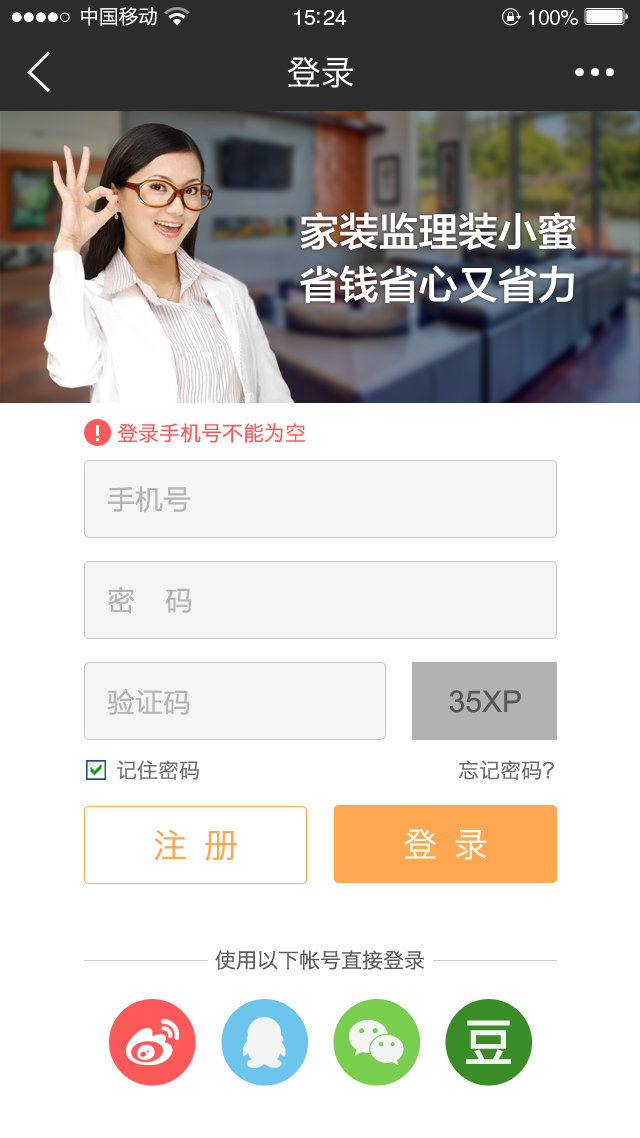
<style>
.page{position:relative;width:640px;height:1138px;background:#ffffff}
.page>*{position:absolute;margin:0}
.t1{font:20px "HiraginoSansGB-W3";letter-spacing:-0.02em;color:#ffffff}
.t2{font:21.5px "HelveticaLTStd-Roman";letter-spacing:-0.02em;color:#ffffff}
.t3{font:20.6px "HelveticaLTStd-Roman";letter-spacing:-0.02em;color:#ffffff}
.t4{font:34px "HiraginoSansGB-W3";color:#ffffff}
.t5{font:39.7px/52.9px "FZLTZHK--GBK1-0";color:#ffffff}
.t6{font:21px "HiraginoSansGB-W3";color:#ff5959}
.t7{font:28px "FZLTHJW--GB1-0";color:#b5b5b5}
.t8{font:21px "HiraginoSansGB-W3";color:#6c6c6c}
.t9{font:34px "HiraginoSansGB-W3";color:#ffa751}
.t10{font:21px "HiraginoSansGB-W3";color:#5b5b5b}
</style>
<div class="page">
<p class="t1" style="left:81px;top:7px;width:76px;height:19px">中国移动</p>
<p class="t2" style="left:294px;top:10px;width:53px;height:15px">15:24</p>
<p class="t3" style="left:529px;top:10px;width:49px;height:15px">100%</p>
<p class="t4" style="left:287px;top:56px;width:66px;height:32px">登录</p>
<p class="t5" style="left:300px;top:212px;width:277px;height:91px">家装监理装小蜜<br>省钱省心又省力</p>
<p class="t6" style="left:117px;top:423px;width:188px;height:20px">登录手机号不能为空</p>
<p class="t7" style="left:107px;top:486px;width:84px;height:27px">手机号</p>
<p class="t7" style="left:107px;top:587px;width:85px;height:27px">密    码</p>
<p class="t7" style="left:107px;top:689px;width:83px;height:26px">验证码</p>
<p class="t8" style="left:117px;top:760px;width:437px;height:20px">记住密码                        忘记密码？</p>
<p class="t9" style="left:154px;top:829px;width:83px;height:32px">注 册</p>
<p class="t4" style="left:404px;top:828px;width:83px;height:32px">登 录</p>
<p class="t10" style="left:215px;top:950px;width:209px;height:20px">使用以下帐号直接登录</p>
</div>
